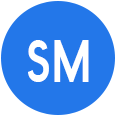
<style>
.page{position:relative;width:118px;height:118px;background:#2377e9}
.page>*{position:absolute;margin:0}
.t1{font:59.7px "Grotte-Bold";letter-spacing:-0.01em;color:#ffffff;text-transform:uppercase;scale:0.79 1}
</style>
<div class="page">
<p class="t1" style="left:28px;top:40px;width:61px;height:42px">sm</p>
</div>
